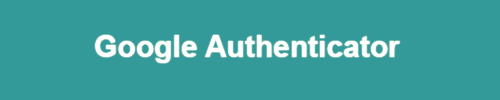
<style>
.page{position:relative;width:500px;height:100px;background:#339999}
.page>*{position:absolute;margin:0}
.t1{font:30px "Arial-BoldMT";color:#ffffff}
</style>
<div class="page">
<p class="t1" style="left:95px;top:35px;width:305px;height:28px">Google Authenticator</p>
</div>
